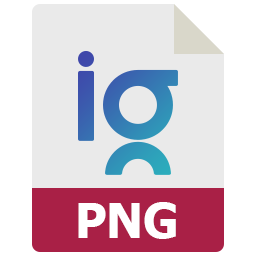
<style>
.page{position:relative;width:256px;height:256px;background:#eaeaea}
.page>*{position:absolute;margin:0}
.t1{font:48px "Tahoma-Bold";color:#ffffff}
</style>
<div class="page">
<p class="t1" style="left:78px;top:202px;width:98px;height:37px">PNG</p>
</div>
